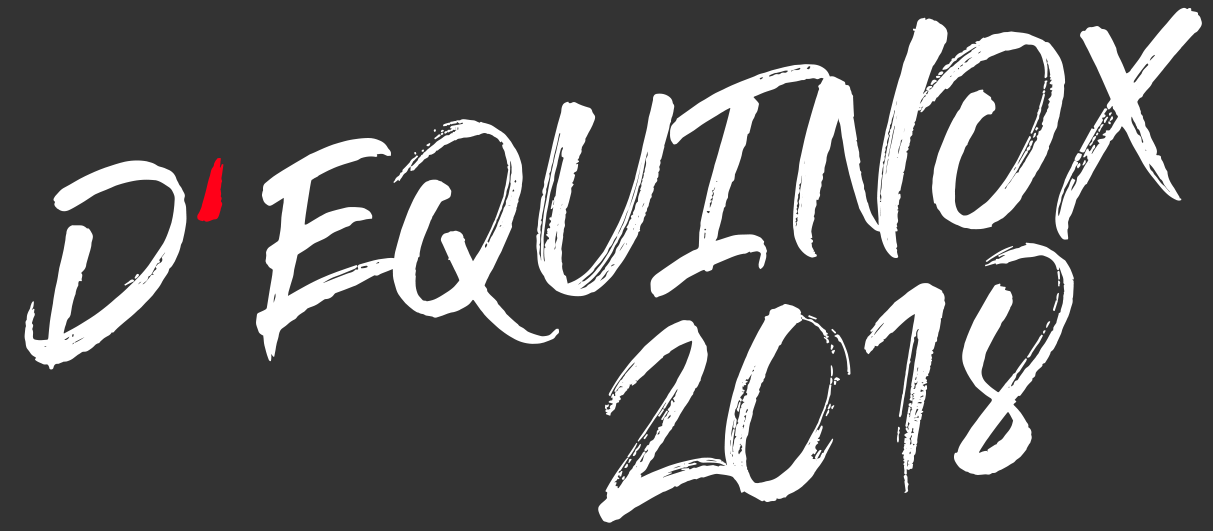
<style>
.page{position:relative;width:1213px;height:531px;background:#333333}
.page>*{position:absolute;margin:0}
.t1{font:178.1px "GlossAndBloom";letter-spacing:-0.025em;color:#ffffff;font-weight:bold}
.t2{font:178.1px "GlossAndBloom";letter-spacing:-0.025em;color:#ff0018;font-weight:bold}
.t3{font:194.1px "GlossAndBloom";letter-spacing:-0.025em;color:#ffffff;font-weight:bold;scale:1.03 1}
</style>
<div class="page">
<p class="t1" style="left:24px;top:7px;width:1178px;height:363px;rotate:-9deg">D<span class="t2">’</span>EQUINOX</p>
<p class="t3" style="left:598px;top:242px;width:476px;height:281px;rotate:-8deg">2018</p>
</div>
